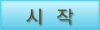
<style>
.page{position:relative;width:100px;height:30px}
.page>*{position:absolute;margin:0}
.t1{font:18px "YGO125";color:#5b4823}
</style>
<div class="page">
<p class="t1" style="left:26px;top:8px;width:48px;height:17px">시  작</p>
</div>
